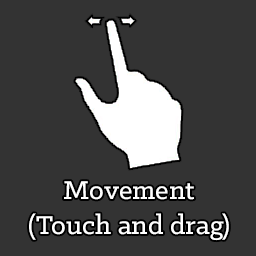
<style>
.page{position:relative;width:256px;height:256px;background:#333333}
.page>*{position:absolute;margin:0}
.t1{font:29.2px "KlinicSlab-Medium";color:#ffffff}
</style>
<div class="page">
<p class="t1" style="left:29px;top:181px;width:200px;height:60px;text-align:center">Movement<br>(Touch and drag)</p>
</div>
